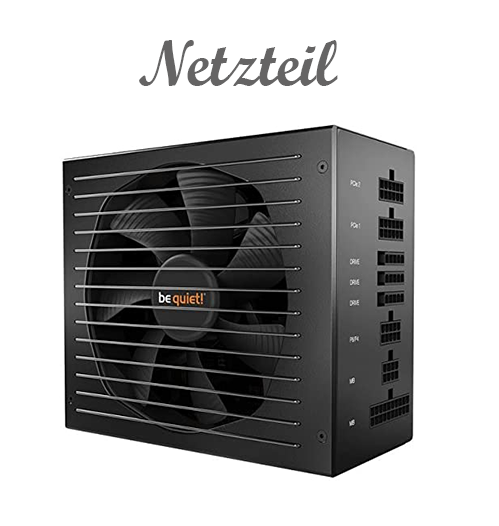
<style>
.page{position:relative;width:499px;height:526px;background:#ffffff}
.page>*{position:absolute;margin:0}
.t1{font:64px "ScriptMTBold";color:#656464}
</style>
<div class="page">
<p class="t1" style="left:139px;top:40px;width:199px;height:46px">Netzteil</p>
</div>
